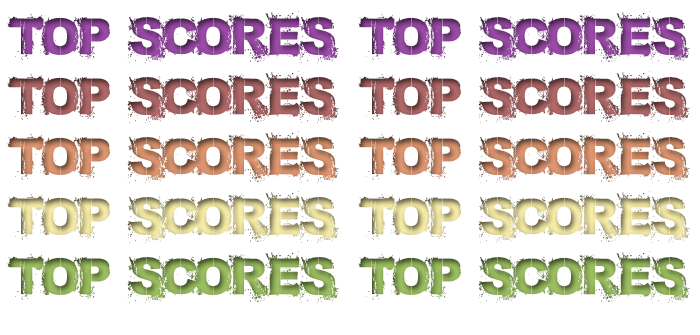
<style>
.page{position:relative;width:700px;height:335px;background:#ffffff}
.page>*{position:absolute;margin:0}
.t1{font:45.7px "BronxBystreets";color:#884293}
.t2{font:45.7px "BronxBystreets";color:#9b5b5b}
.t3{font:45.7px "BronxBystreets"}
</style>
<div class="page">
<p class="t1" style="left:7px;top:11px;width:332px;height:52px">top scores</p>
<p class="t1" style="left:358px;top:11px;width:332px;height:52px">top scores</p>
<p class="t2" style="left:7px;top:71px;width:332px;height:52px">top scores</p>
<p class="t2" style="left:358px;top:71px;width:332px;height:52px">top scores</p>
<p class="t3" style="left:7px;top:131px;width:332px;height:52px">top scores</p>
<p class="t3" style="left:358px;top:131px;width:332px;height:52px">top scores</p>
<p class="t3" style="left:7px;top:191px;width:332px;height:52px">top scores</p>
<p class="t3" style="left:358px;top:191px;width:332px;height:52px">top scores</p>
<p class="t3" style="left:7px;top:251px;width:332px;height:52px">top scores</p>
<p class="t3" style="left:358px;top:251px;width:332px;height:52px">top scores</p>
</div>
